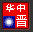
<style>
.page{position:relative;width:33px;height:32px;background:#f20000}
.page>*{position:absolute;margin:0}
.t1{font:10.4px "SimSun";color:#ffffff}
.t2{font:11.7px "SimSun";color:#ffffff}
</style>
<div class="page">
<p class="t1" style="left:6px;top:4px;width:19px;height:8px">华中</p>
<p class="t2" style="left:16px;top:15px;width:11px;height:12px">晋</p>
</div>
